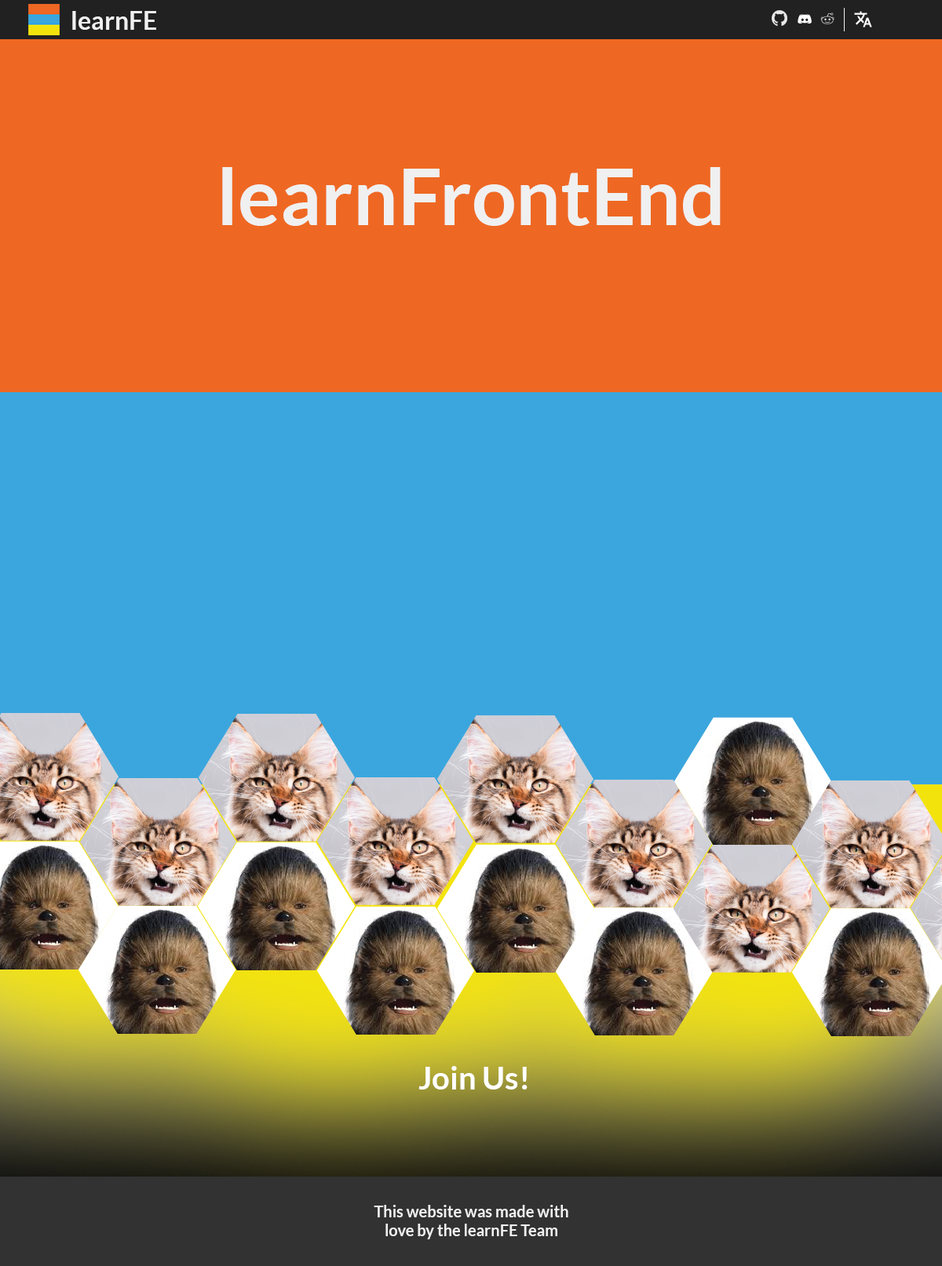
<style>
.page{position:relative;width:942px;height:1266px;background:#3ba6dd}
.page>*{position:absolute;margin:0}
.t1{font:25.1px "Lato-Bold";color:#f0f0f0}
.t2{font:78.5px "Lato-Bold";color:#f0f0f0}
.t3{font:31.4px "Lato-Bold";color:#ffffff}
.t4{font:15.7px "Lato-Bold";color:#f0f0f0}
</style>
<div class="page">
<p class="t1" style="left:72px;top:11px;width:84px;height:19px">learnFE</p>
<p class="t2" style="left:222px;top:167px;width:498px;height:59px">learnFrontEnd</p>
<p class="t3" style="left:418px;top:1066px;width:109px;height:24px">Join Us!</p>
<p class="t4" style="left:373px;top:1205px;width:195px;height:35px;text-align:center">This website was made with<br>love by the learnFE Team</p>
</div>
